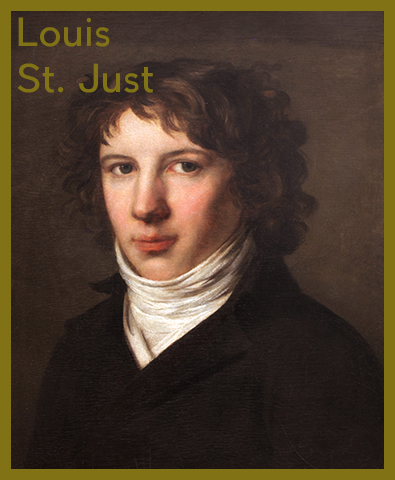
<style>
.page{position:relative;width:395px;height:480px}
.page>*{position:absolute;margin:0}
.t1{font:38px "PierSans";color:#807215}
</style>
<div class="page">
<p class="t1" style="left:17px;top:17px;width:136px;height:76px">Louis<br>St. Just</p>
</div>
